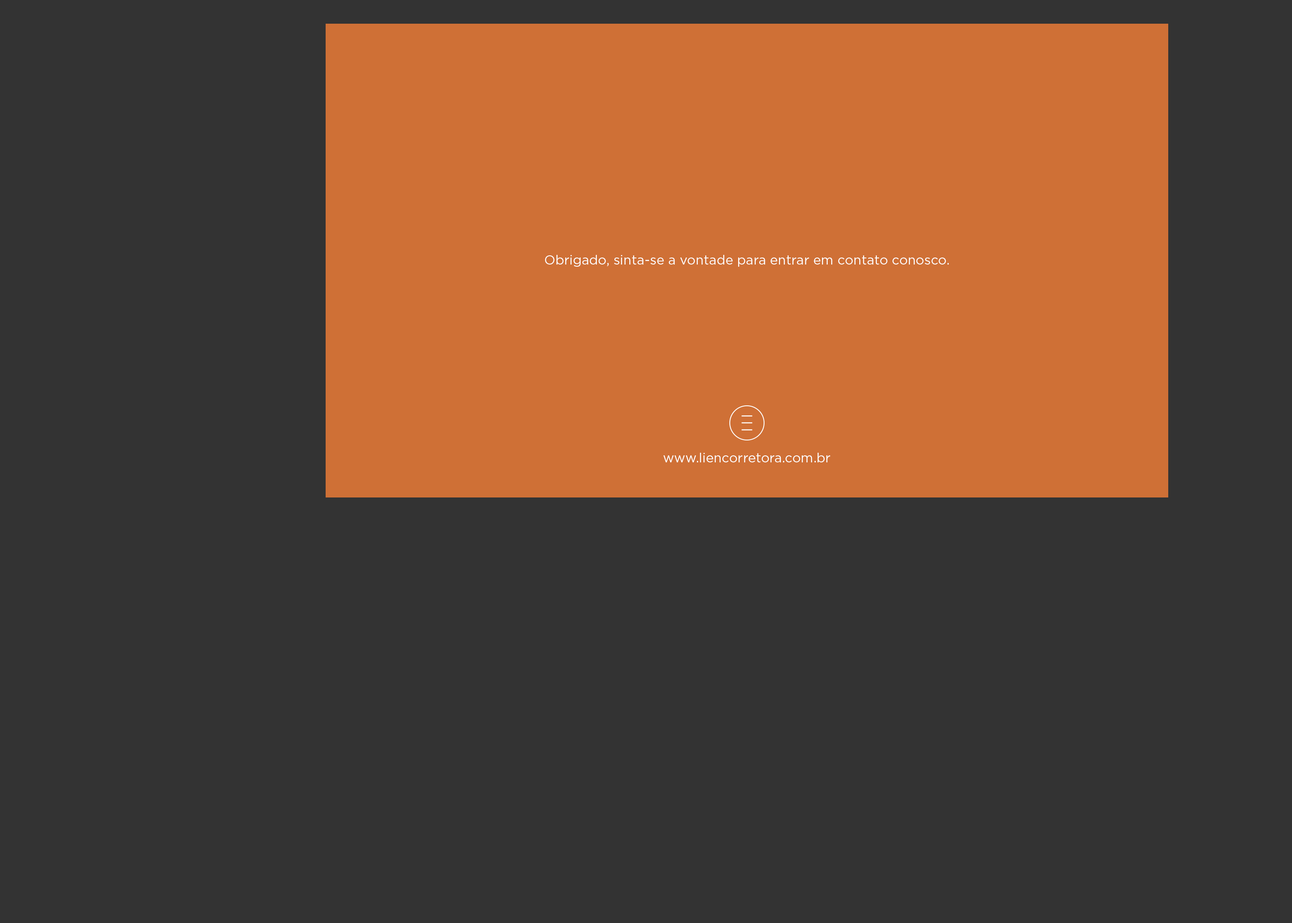
<style>
.page{position:relative;width:1292px;height:923px;background:#333333}
.page>*{position:absolute;margin:0}
.t1{font:13.2px "Gotham-Book";color:#ffffff}
</style>
<div class="page">
<p class="t1" style="left:545px;top:255px;width:404px;height:12px">Obrigado, sinta-se a vontade para entrar em contato conosco.</p>
<p class="t1" style="left:663px;top:453px;width:167px;height:9px">www.liencorretora.com.br</p>
</div>
